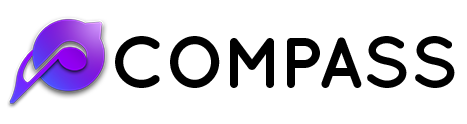
<style>
.page{position:relative;width:467px;height:124px;background:#ffffff}
.page>*{position:absolute;margin:0}
.t1{font:72px "QuicksandBold-Regular";color:#000000}
</style>
<div class="page">
<p class="t1" style="left:115px;top:36px;width:340px;height:52px">COMPASS</p>
</div>
